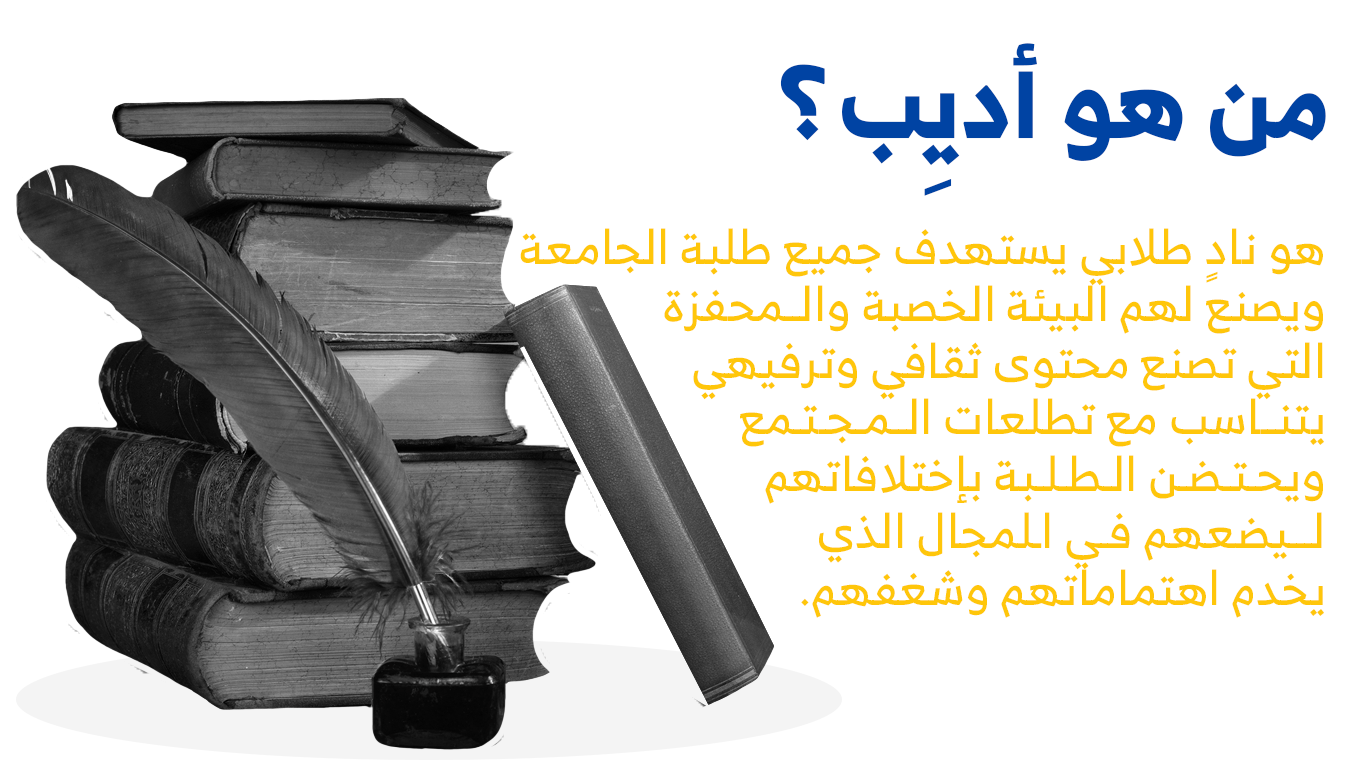
<style>
.page{position:relative;width:1366px;height:768px;background:#ffffff}
.page>*{position:absolute;margin:0}
.t1{font:101.4px "RB-Bold";color:#0043a3;text-transform:uppercase}
.t2{font:47.3px "RB-Regular";color:#ffc60a;text-transform:uppercase}
</style>
<div class="page">
<p class="t1" style="left:842px;top:43px;width:484px;height:153px">من هو أديِب</p>
<p class="t1" style="left:780px;top:64px;width:45px;height:77px;rotate:180deg">?</p>
<p class="t2" style="left:520px;top:228px;width:804px;height:390px">هو نادٍ طلابي يستهدف جميع طلبة الجامعة<br>ويصنع لهم البيئة الخصبة والــمحفزة<br>التي تصنع محتوى ثقافي وترفيهي <br>يتنــاسب مع تطلعات الــمـجـتـمع<br>ويحـتـضـن الـطـلـبة بإختلافاتهم<br>لـــيضعهم فـي اـلمجال الذي<br>يخدم اهتماماتهم وشغفهم.</p>
</div>
